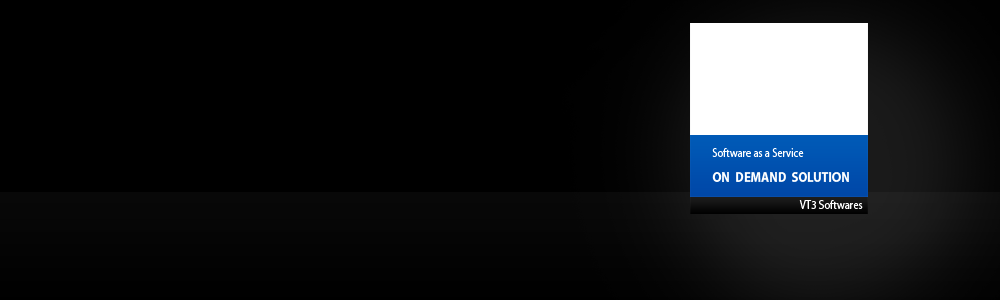
<style>
.page{position:relative;width:1000px;height:300px;background:#000000}
.page>*{position:absolute;margin:0}
.t1{font:12px "MyriadPro-Regular";color:#ffffff;scale:0.87 1}
.t2{font:14px "MyriadPro-Bold";color:#ffffff;scale:0.89 1}
.t3{font:12px "MyriadPro-Regular";color:#ffffff;scale:0.89 1}
</style>
<div class="page">
<p class="t1" style="left:712px;top:148px;width:92px;height:9px">Software as a Service</p>
<p class="t2" style="left:712px;top:172px;width:137px;height:10px">ON  DEMAND  SOLUTION</p>
<p class="t3" style="left:799px;top:200px;width:64px;height:9px">VT3 Softwares</p>
</div>
